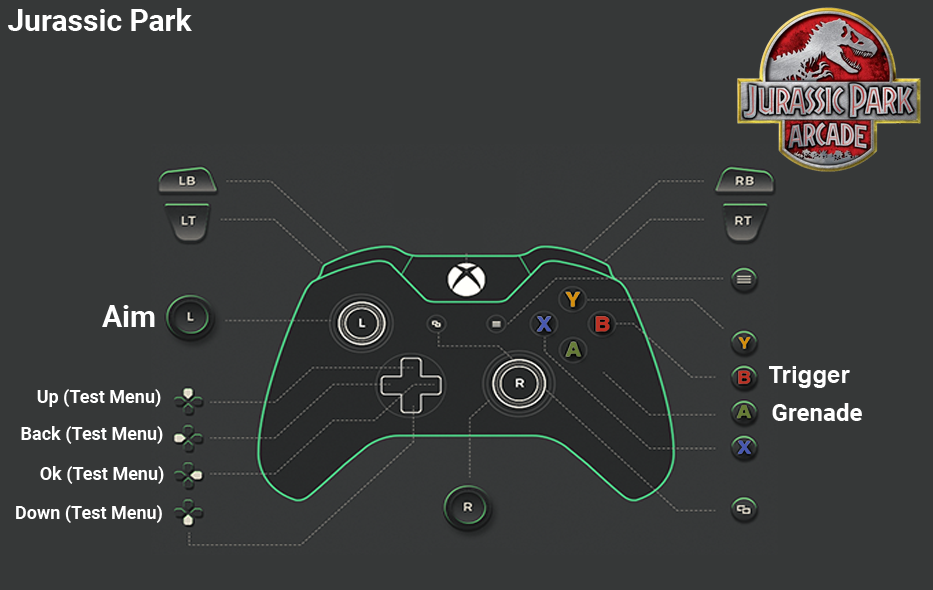
<style>
.page{position:relative;width:933px;height:590px;background:#363838}
.page>*{position:absolute;margin:0}
.t1{font:30px "Roboto-Bold";color:#ffffff}
.t2{font:30px "Roboto-Bold";color:#fefefe}
.t3{font:24px "Arial-BoldMT";color:#fefefe}
.t4{font:18px "Roboto-Bold";color:#ffffff}
.t5{font:24px "Roboto-Bold";color:#ffffff}
</style>
<div class="page">
<p class="t1" style="left:8px;top:8px;width:184px;height:23px">Jurassic Park</p>
<p class="t2" style="left:102px;top:305px;width:53px;height:22px">Aim</p>
<p class="t3" style="left:769px;top:366px;width:81px;height:22px">Trigger</p>
<p class="t4" style="left:37px;top:389px;width:124px;height:18px">Up (Test Menu)</p>
<p class="t5" style="left:772px;top:403px;width:90px;height:18px">Grenade</p>
<p class="t4" style="left:21px;top:426px;width:142px;height:18px">Back (Test Menu)</p>
<p class="t4" style="left:40px;top:466px;width:124px;height:18px">Ok (Test Menu)</p>
<p class="t4" style="left:16px;top:505px;width:146px;height:18px">Down (Test Menu)</p>
</div>
